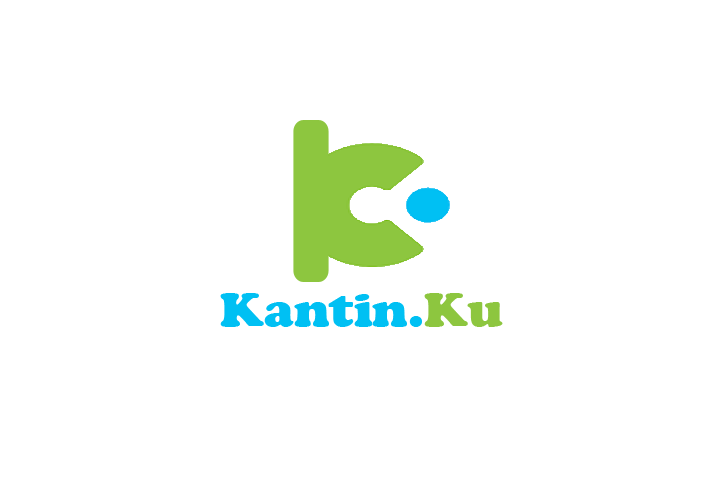
<style>
.page{position:relative;width:720px;height:480px;background:#ffffff}
.page>*{position:absolute;margin:0}
.t1{font:48px "CooperBlack";color:#00c0f3;scale:1.1 1}
.t2{font:48px "CooperBlack";color:#8dc63f;scale:1.1 1}
</style>
<div class="page">
<p class="t1" style="left:220px;top:293px;width:283px;height:34px">Kantin.<span class="t2">Ku</span></p>
</div>
